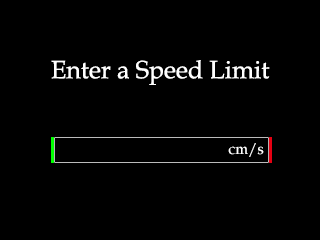
<style>
.page{position:relative;width:320px;height:240px;background:#000000}
.page>*{position:absolute;margin:0}
.t1{font:25px "BookAntiqua";color:#ffffff}
.t2{font:15px "BookAntiqua";color:#ffffff}
</style>
<div class="page">
<p class="t1" style="left:51px;top:60px;width:219px;height:25px">Enter a Speed Limit</p>
<p class="t2" style="left:228px;top:143px;width:36px;height:14px">cm/s</p>
</div>
